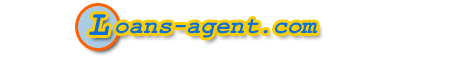
<style>
.page{position:relative;width:453px;height:60px;background:#ffffff}
.page>*{position:absolute;margin:0}
.t1{font:36px "CourierNewPS-BoldItalicMT";color:#0871dd}
.t2{font:24px "CourierNewPS-BoldItalicMT";color:#0871dd}
</style>
<div class="page">
<p class="t1" style="left:89px;top:14px;width:21px;height:21px">L</p>
<p class="t2" style="left:116px;top:19px;width:202px;height:19px">oans-agent.com</p>
</div>
